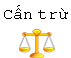
<style>
.page{position:relative;width:71px;height:58px;background:#ffffff}
.page>*{position:absolute;margin:0}
.t1{font:12px "CourierNewPSMT";color:#000000}
</style>
<div class="page">
<p class="t1" style="left:4px;top:5px;width:64px;height:14px">Cấn trừ</p>
</div>
